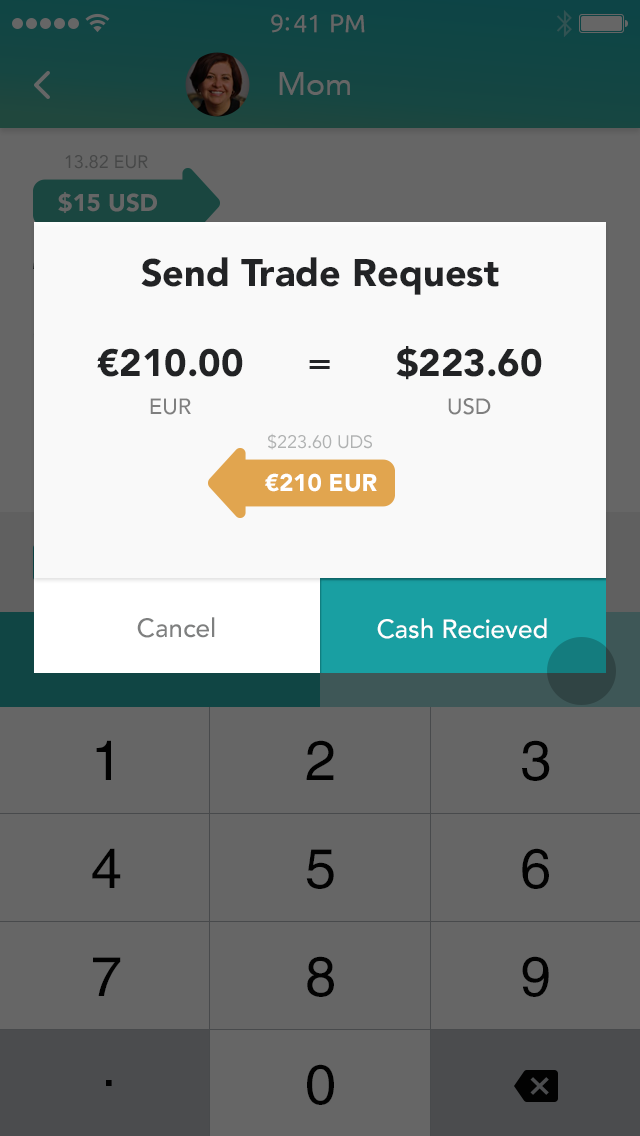
<style>
.page{position:relative;width:640px;height:1136px;background:#666666}
.page>*{position:absolute;margin:0}
.t1{font:38px "Avenir-Black";color:#222325}
.t2{font:22px/38px "Avenir-Medium";color:#7f7f7f}
.t3{font:38px "Avenir-Medium";color:#222325}
.t4{font:18px "Avenir-Roman";color:#b0b2b2}
.t5{font:24px "Avenir-Black";color:#ffffff}
.t6{font:26px "Avenir-Medium";color:#7e7f7f}
.t7{font:26px "Avenir-Medium";color:#ffffff}
</style>
<div class="page">
<p class="t1" style="left:141px;top:257px;width:358px;height:38px">Send Trade Request</p>
<p class="t1" style="left:97px;top:348px;width:146px;height:67px;text-align:center">€210.00<br><span class="t2">EUR</span></p>
<p class="t1" style="left:396px;top:346px;width:146px;height:69px;text-align:center">$223.60<br><span class="t2">USD</span></p>
<p class="t3" style="left:309px;top:360px;width:21px;height:9px">=</p>
<p class="t4" style="left:268px;top:433px;width:104px;height:17px">$223.60 UDS</p>
<p class="t5" style="left:265px;top:473px;width:112px;height:19px">€210 EUR</p>
<p class="t6" style="left:137px;top:617px;width:78px;height:21px">Cancel</p>
<p class="t7" style="left:377px;top:617px;width:170px;height:21px">Cash Recieved</p>
<p class="t7" style="left:377px;top:618px;width:170px;height:21px">Cash Recieved</p>
</div>
